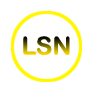
<style>
.page{position:relative;width:100px;height:100px;background:#ffffff}
.page>*{position:absolute;margin:0}
.t1{font:25px "ArialRoundedMTBold"}
</style>
<div class="page">
<p class="t1" style="left:23px;top:36px;width:47px;height:19px">LSN</p>
</div>
